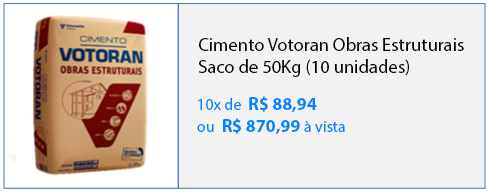
<style>
.page{position:relative;width:489px;height:192px;background:#f2f2f2}
.page>*{position:absolute;margin:0}
.t1{font:18.6px "MyriadPro-Regular";color:#000000}
.t2{font:18px "MyriadPro-Bold";color:#0084ff}
.t3{font:16px "MyriadPro-Regular";color:#0084ff}
</style>
<div class="page">
<p class="t1" style="left:198px;top:37px;width:266px;height:40px">Cimento Votoran Obras Estruturais<br>Saco de 50Kg (10 unidades)</p>
<p class="t2" style="left:197px;top:96px;width:148px;height:38px"><span class="t3">10x de  </span>R$ 88,94<br><span class="t3">ou  </span>R$ 870,99 <span class="t3">à vista</span></p>
</div>
